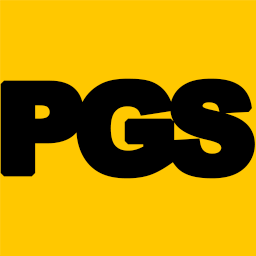
<style>
.page{position:relative;width:256px;height:256px;background:#ffc800}
.page>*{position:absolute;margin:0}
.t1{font:125.2px "Arial-Black";letter-spacing:-0.12em;color:#000000;font-weight:bold}
</style>
<div class="page">
<p class="t1" style="left:0px;top:78px;width:255px;height:101px">PGS</p>
</div>
